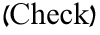
<style>
.page{position:relative;width:100px;height:35px;background:#ffffff}
.page>*{position:absolute;margin:0}
.t1{font:31px "David";color:#000000}
</style>
<div class="page">
<p class="t1" style="left:3px;top:2px;width:93px;height:25px">(Check)</p>
</div>
